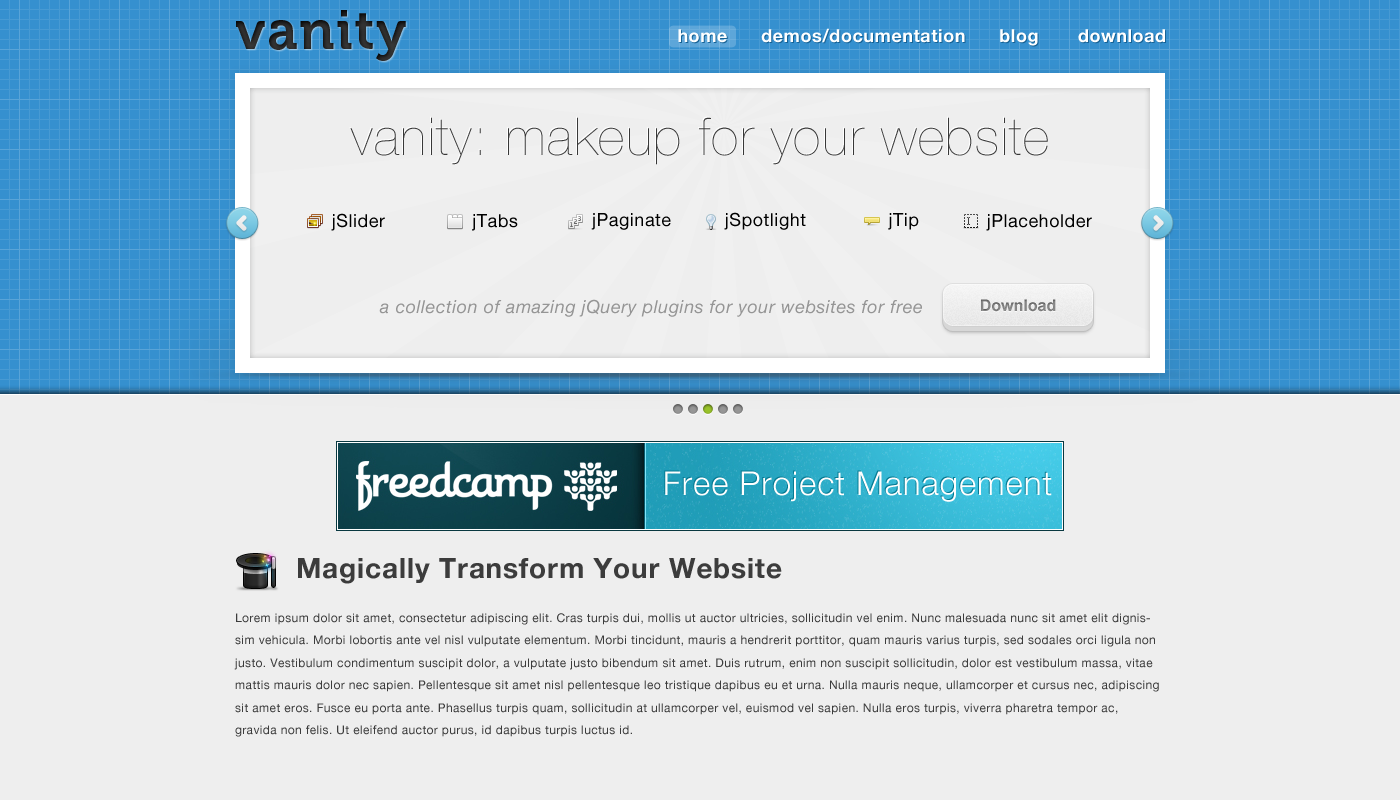
<style>
.page{position:relative;width:1400px;height:800px;background:#eeeeee}
.page>*{position:absolute;margin:0}
.t1{font:55px "Museo700-Regular";letter-spacing:0.03em;color:#292929}
.t2{font:18px "HelveticaNeue-Bold";letter-spacing:0.03em;color:#ffffff}
.t3{font:52px "HelveticaNeue-UltraLight";letter-spacing:0.03em;color:#383838}
.t4{font:18px "HelveticaNeue";letter-spacing:0.03em;color:#000000}
.t5{font:18px "HelveticaNeue-Italic";letter-spacing:0.03em;color:#959595}
.t6{font:16px "Arial-BoldMT";color:#959595}
.t7{font:28px "HelveticaNeue-Bold";letter-spacing:0.03em;color:#3c3c3c}
.t8{font:12px/22.5px "HelveticaNeue";letter-spacing:0.03em;color:#3c3c3c}
</style>
<div class="page">
<p class="t1" style="left:236px;top:10px;width:170px;height:51px">vanity</p>
<p class="t2" style="left:678px;top:28px;width:487px;height:18px">home      demos/documentation      blog       download</p>
<p class="t3" style="left:350px;top:117px;width:698px;height:48px">vanity: makeup for your website</p>
<p class="t4" style="left:331px;top:213px;width:54px;height:18px">jSlider</p>
<p class="t4" style="left:472px;top:214px;width:46px;height:17px">jTabs</p>
<p class="t4" style="left:591px;top:213px;width:80px;height:17px">jPaginate</p>
<p class="t4" style="left:724px;top:212px;width:82px;height:18px">jSpotlight</p>
<p class="t4" style="left:888px;top:213px;width:31px;height:17px">jTip</p>
<p class="t4" style="left:986px;top:214px;width:106px;height:17px">jPlaceholder</p>
<p class="t5" style="left:379px;top:299px;width:543px;height:18px">a collection of amazing jQuery plugins for your websites for free</p>
<p class="t6" style="left:981px;top:299px;width:75px;height:13px">Download</p>
<p class="t7" style="left:298px;top:558px;width:484px;height:26px">Magically Transform Your Website</p>
<p class="t8" style="left:234px;top:613px;width:925px;height:124px">Lorem ipsum dolor sit amet, consectetur adipiscing elit. Cras turpis dui, mollis ut auctor ultricies, sollicitudin vel enim. Nunc malesuada nunc sit amet elit dignissim vehicula. Morbi lobortis ante vel nisl vulputate elementum. Morbi tincidunt, mauris a hendrerit porttitor, quam mauris varius turpis, sed sodales orci ligula non justo. Vestibulum condimentum suscipit dolor, a vulputate justo bibendum sit amet. Duis rutrum, enim non suscipit sollicitudin, dolor est vestibulum massa, vitae mattis mauris dolor nec sapien. Pellentesque sit amet nisl pellentesque leo tristique dapibus eu et urna. Nulla mauris neque, ullamcorper et cursus nec, adipiscing sit amet eros. Fusce eu porta ante. Phasellus turpis quam, sollicitudin at ullamcorper vel, euismod vel sapien. Nulla eros turpis, viverra pharetra tempor ac, gravida non felis. Ut eleifend auctor purus, id dapibus turpis luctus id.</p>
</div>
